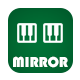
<style>
.page{position:relative;width:80px;height:80px;background:#ffffff}
.page>*{position:absolute;margin:0}
.t1{font:15px "Bauhaus93";color:#ffffff}
</style>
<div class="page">
<p class="t1" style="left:13px;top:56px;width:55px;height:12px">MIRROR</p>
</div>
